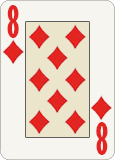
<style>
.page{position:relative;width:115px;height:160px;background:#f7f5ef}
.page>*{position:absolute;margin:0}
.t1{font:41.7px "GillSansMT-ExtraCondensedBold";color:#e22523}
</style>
<div class="page">
<p class="t1" style="left:7px;top:5px;width:12px;height:33px">8</p>
<p class="t1" style="left:96px;top:122px;width:12px;height:33px;rotate:180deg">8</p>
</div>
